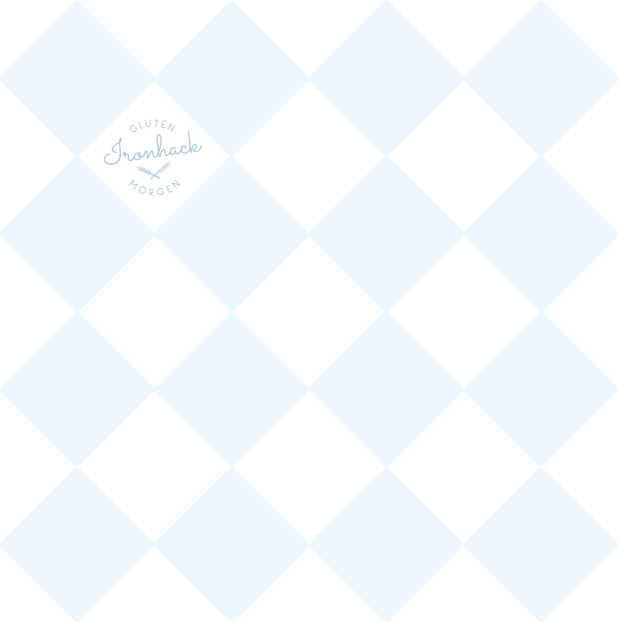
<style>
.page{position:relative;width:618px;height:622px;background:#edf7ff}
.page>*{position:absolute;margin:0}
.t1{font:11px "SulphurPoint-Bold";letter-spacing:-0.15em;color:#a2c2dc}
.t2{font:31.9px "Sacramento-Regular";color:#a2c2dc}
.t3{font:11px "SulphurPoint-Bold";letter-spacing:-0.06em;color:#a2c2dc}
</style>
<div class="page">
<p class="t1" style="left:129px;top:119px;width:47px;height:14px;rotate:-12deg;opacity:0.8">G L U T E N</p>
<p class="t2" style="left:103px;top:130px;width:99px;height:35px;rotate:-8deg;opacity:0.8">Ironhack</p>
<p class="t3" style="left:128px;top:179px;width:53px;height:17px;rotate:-131deg;opacity:0.8">M O R G E N</p>
</div>
